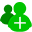
<style>
.page{position:relative;width:32px;height:32px;background:#ffffff}
.page>*{position:absolute;margin:0}
.t1{font:42.2px "DaunPenh"}
</style>
<div class="page">
<p class="t1" style="left:14px;top:16px;width:12px;height:13px">+</p>
</div>
